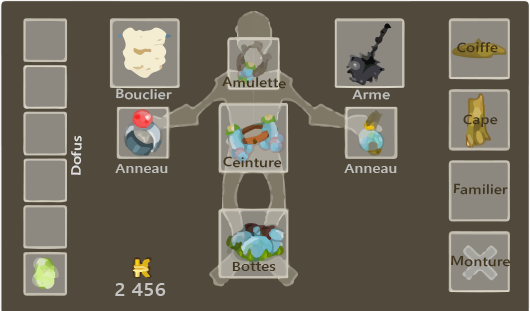
<style>
.page{position:relative;width:530px;height:311px;background:#514a3c}
.page>*{position:absolute;margin:0}
.t1{font:13.2px "SegoeUI-Semibold";color:#41351e;scale:1.16 1}
.t2{font:13.2px "SegoeUI-Semibold";color:#bfbfbc;scale:1.16 1}
.t3{font:13.2px "SegoeUI-Semibold";color:#e1e1e1;scale:1.16 1}
.t4{font:17.6px "SegoeUI-Semibold";color:#c5c3c1;scale:1.16 1}
</style>
<div class="page">
<p class="t1" style="left:457px;top:42px;width:41px;height:11px;rotate:1deg">Coiffe</p>
<p class="t1" style="left:222px;top:76px;width:64px;height:13px;rotate:1deg">Amulette</p>
<p class="t2" style="left:116px;top:88px;width:56px;height:12px;rotate:1deg">Bouclier</p>
<p class="t2" style="left:352px;top:89px;width:38px;height:11px;rotate:1deg">Arme</p>
<p class="t1" style="left:463px;top:114px;width:35px;height:14px;rotate:1deg">Cape</p>
<p class="t3" style="left:71px;top:135px;width:11px;height:40px;rotate:-89deg">Dofus</p>
<p class="t1" style="left:223px;top:156px;width:59px;height:12px;rotate:1deg">Ceinture</p>
<p class="t2" style="left:115px;top:164px;width:53px;height:9px">Anneau</p>
<p class="t2" style="left:344px;top:164px;width:53px;height:9px">Anneau</p>
<p class="t1" style="left:453px;top:183px;width:55px;height:12px;rotate:1deg">Familier</p>
<p class="t1" style="left:451px;top:255px;width:60px;height:12px;rotate:1deg">Monture</p>
<p class="t1" style="left:232px;top:262px;width:44px;height:9px">Bottes</p>
<p class="t4" style="left:115px;top:283px;width:51px;height:13px">2 456</p>
</div>
